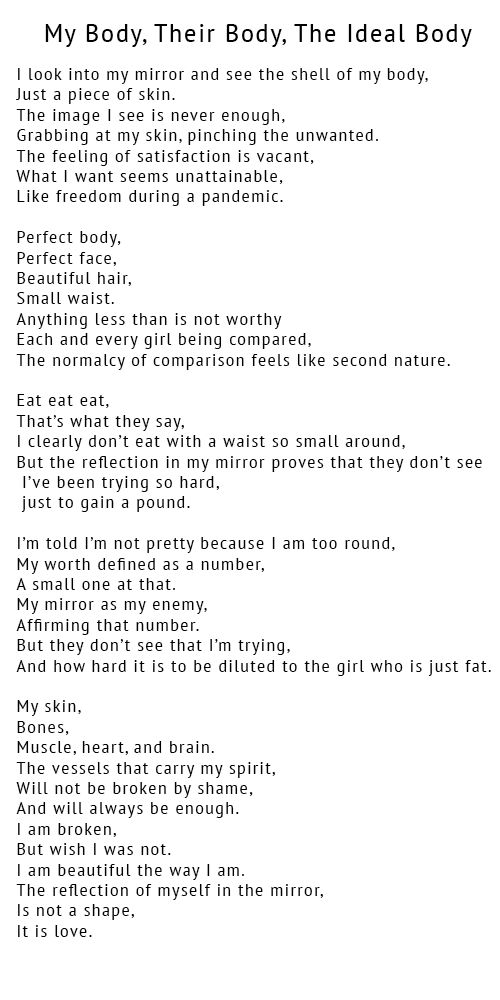
<style>
.page{position:relative;width:500px;height:1000px;background:#ffffff}
.page>*{position:absolute;margin:0}
.t1{font:25px "PTSans-Narrow";letter-spacing:0.06em;color:#000000;scale:1.2 1}
.t2{font:17px "PTSans-Narrow";letter-spacing:0.06em;color:#000000;scale:1.2 1}
</style>
<div class="page">
<p class="t1" style="left:45px;top:24px;width:427px;height:23px">My Body, Their Body, The Ideal Body</p>
<p class="t2" style="left:16px;top:68px;width:475px;height:869px">I look into my mirror and see the shell of my body,<br>Just a piece of skin.<br>The image I see is never enough,<br>Grabbing at my skin, pinching the unwanted.<br>The feeling of satisfaction is vacant,<br>What I want seems unattainable,<br>Like freedom during a pandemic.<br><br>Perfect body,<br>Perfect face,<br>Beautiful hair,<br>Small waist.<br>Anything less than is not worthy<br>Each and every girl being compared,<br>The normalcy of comparison feels like second nature.<br><br>Eat eat eat,<br>That’s what they say,<br>I clearly don’t eat with a waist so small around,<br>But the reflection in my mirror proves that they don’t see<br> I’ve been trying so hard,<br> just to gain a pound.<br><br>I’m told I’m not pretty because I am too round,<br>My worth defined as a number,<br>A small one at that.<br>My mirror as my enemy,<br>Affirming that number.<br>But they don’t see that I’m trying,<br>And how hard it is to be diluted to the girl who is just fat.<br><br>My skin,<br>Bones,<br>Muscle, heart, and brain.<br>The vessels that carry my spirit,<br>Will not be broken by shame,<br>And will always be enough.<br>I am broken,<br>But wish I was not.<br>I am beautiful the way I am.<br>The reflection of myself in the mirror,<br>Is not a shape,<br>It is love.</p>
</div>
